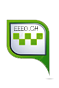
<style>
.page{position:relative;width:59px;height:88px;background:#ffffff}
.page>*{position:absolute;margin:0}
.t1{font:10.6px "THMaliGrade6-Bold"}
</style>
<div class="page">
<p class="t1" style="left:14px;top:26px;width:24px;height:5px">EEEG.CH</p>
</div>
